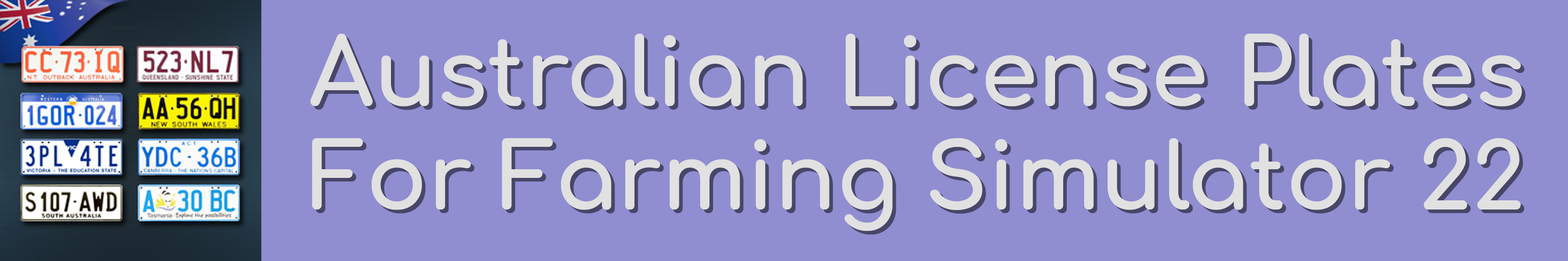
<style>
.page{position:relative;width:1568px;height:261px;background:#908dd1}
.page>*{position:absolute;margin:0}
.t1{font:92.6px "Comfortaa-Bold";color:#e1e1e1}
.t2{font:91.2px "Comfortaa-Bold";color:#e1e1e1}
</style>
<div class="page">
<p class="t1" style="left:310px;top:34px;width:1212px;height:73px">Australian License Plates</p>
<p class="t2" style="left:312px;top:138px;width:1209px;height:93px">For Farming Simulator 22</p>
</div>
